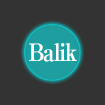
<style>
.page{position:relative;width:105px;height:105px;background:#333333}
.page>*{position:absolute;margin:0}
.t1{font:24px "RyuminPro-ExBold";letter-spacing:-0.08em;color:#fefefe;scale:0.9 1}
</style>
<div class="page">
<p class="t1" style="left:29px;top:43px;width:48px;height:19px">Balik</p>
</div>
